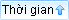
<style>
.page{position:relative;width:69px;height:20px}
.page>*{position:absolute;margin:0}
.t1{font:12px "ArialMT";color:#000000}
</style>
<div class="page">
<p class="t1" style="left:2px;top:4px;width:51px;height:12px">Thời gian</p>
</div>
